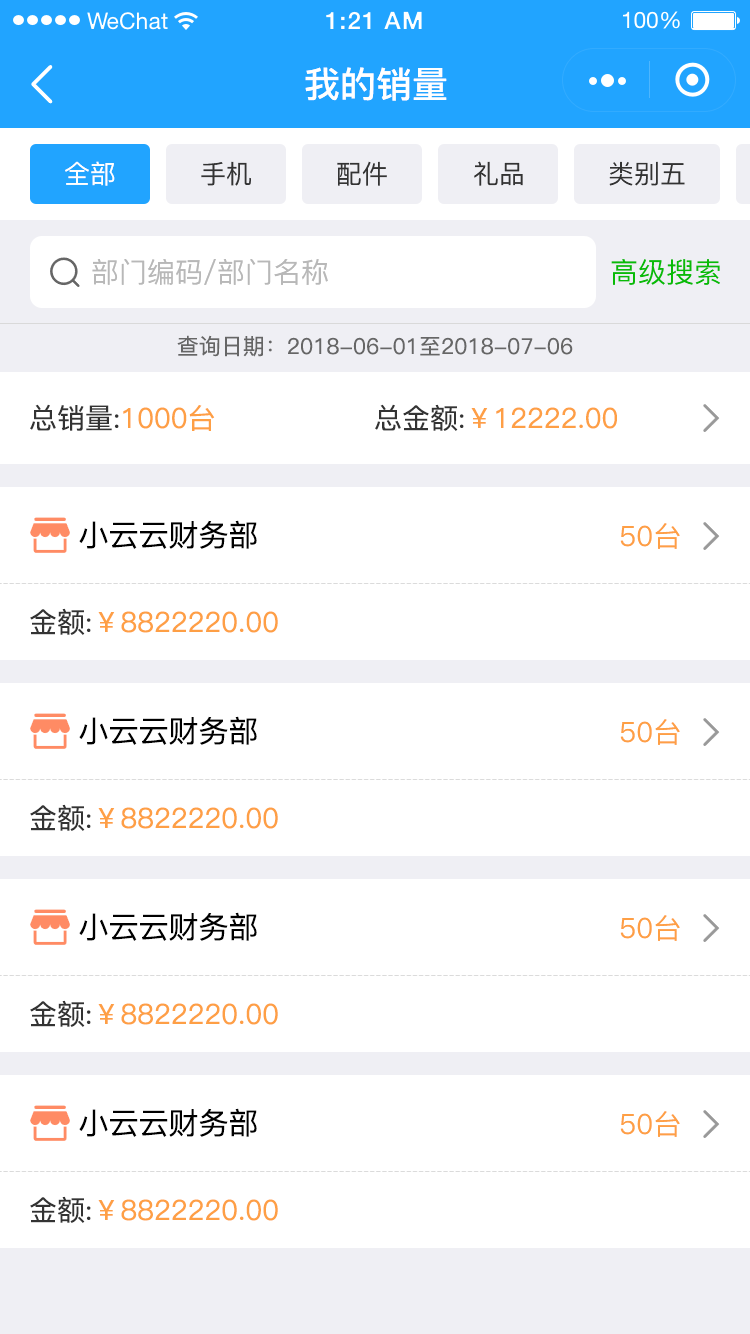
<style>
.page{position:relative;width:750px;height:1334px;background:#ffffff}
.page>*{position:absolute;margin:0}
.t1{font:36px "PingFang-SC-Bold";color:#ffffff}
.t2{font:26px "PingFang-SC-Medium";color:#ffffff}
.t3{font:26px "PingFang-SC-Medium";color:#333333}
.t4{font:28px "PingFang-SC-Medium";color:#b8b8b8}
.t5{font:28px "PingFang-SC-Medium";color:#09bb07}
.t6{font:22px "PingFang-SC-Medium";color:#666666}
.t7{font:28px "PingFang-SC-Medium";color:#fe9f45}
.t8{font:28px "PingFang-SC-Medium";color:#333333}
.t9{font:30px "PingFang-SC-Medium";color:#000000}
</style>
<div class="page">
<p class="t1" style="left:305px;top:67px;width:142px;height:34px">我的销量</p>
<p class="t2" style="left:65px;top:161px;width:50px;height:25px">全部</p>
<p class="t3" style="left:201px;top:161px;width:50px;height:25px">手机</p>
<p class="t3" style="left:337px;top:161px;width:50px;height:25px">配件</p>
<p class="t3" style="left:474px;top:161px;width:49px;height:25px">礼品</p>
<p class="t3" style="left:609px;top:161px;width:76px;height:25px">类别五</p>
<p class="t4" style="left:92px;top:259px;width:236px;height:26px">部门编码/部门名称</p>
<p class="t5" style="left:611px;top:259px;width:109px;height:26px">高级搜索</p>
<p class="t6" style="left:177px;top:335px;width:396px;height:22px">查询日期：2018-06-01至2018-07-06</p>
<p class="t7" style="left:30px;top:404px;width:185px;height:27px"><span class="t8">总销量:</span>1000台</p>
<p class="t7" style="left:375px;top:404px;width:242px;height:27px"><span class="t8">总金额:</span>￥12222.00</p>
<p class="t9" style="left:79px;top:520px;width:178px;height:29px">小云云财务部</p>
<p class="t7" style="left:620px;top:523px;width:60px;height:26px">50台</p>
<p class="t7" style="left:30px;top:608px;width:248px;height:27px"><span class="t8">金额:</span>￥8822220.00</p>
<p class="t9" style="left:79px;top:716px;width:178px;height:29px">小云云财务部</p>
<p class="t7" style="left:620px;top:719px;width:60px;height:26px">50台</p>
<p class="t7" style="left:30px;top:804px;width:248px;height:27px"><span class="t8">金额:</span>￥8822220.00</p>
<p class="t9" style="left:79px;top:912px;width:178px;height:29px">小云云财务部</p>
<p class="t7" style="left:620px;top:915px;width:60px;height:26px">50台</p>
<p class="t7" style="left:30px;top:1000px;width:248px;height:27px"><span class="t8">金额:</span>￥8822220.00</p>
<p class="t9" style="left:79px;top:1108px;width:178px;height:29px">小云云财务部</p>
<p class="t7" style="left:620px;top:1111px;width:60px;height:26px">50台</p>
<p class="t7" style="left:30px;top:1196px;width:248px;height:27px"><span class="t8">金额:</span>￥8822220.00</p>
</div>
